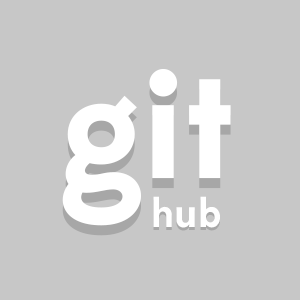
<style>
.page{position:relative;width:300px;height:300px;background:#c7c7c7}
.page>*{position:absolute;margin:0}
.t1{font:149.1px "Edmondsans-Bold";color:#ffffff}
.t2{font:40.3px "Edmondsans-Bold";color:#ffffff}
</style>
<div class="page">
<p class="t1" style="left:62px;top:69px;width:169px;height:157px">git</p>
<p class="t2" style="left:153px;top:196px;width:67px;height:32px">hub</p>
</div>
